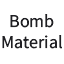
<style>
.page{position:relative;width:64px;height:64px;background:#ffffff}
.page>*{position:absolute;margin:0}
.t1{font:18px "SourceSansRoman-Regular";color:#202024}
</style>
<div class="page">
<p class="t1" style="left:2px;top:14px;width:60px;height:35px;text-align:center">Bomb<br>Material</p>
</div>
